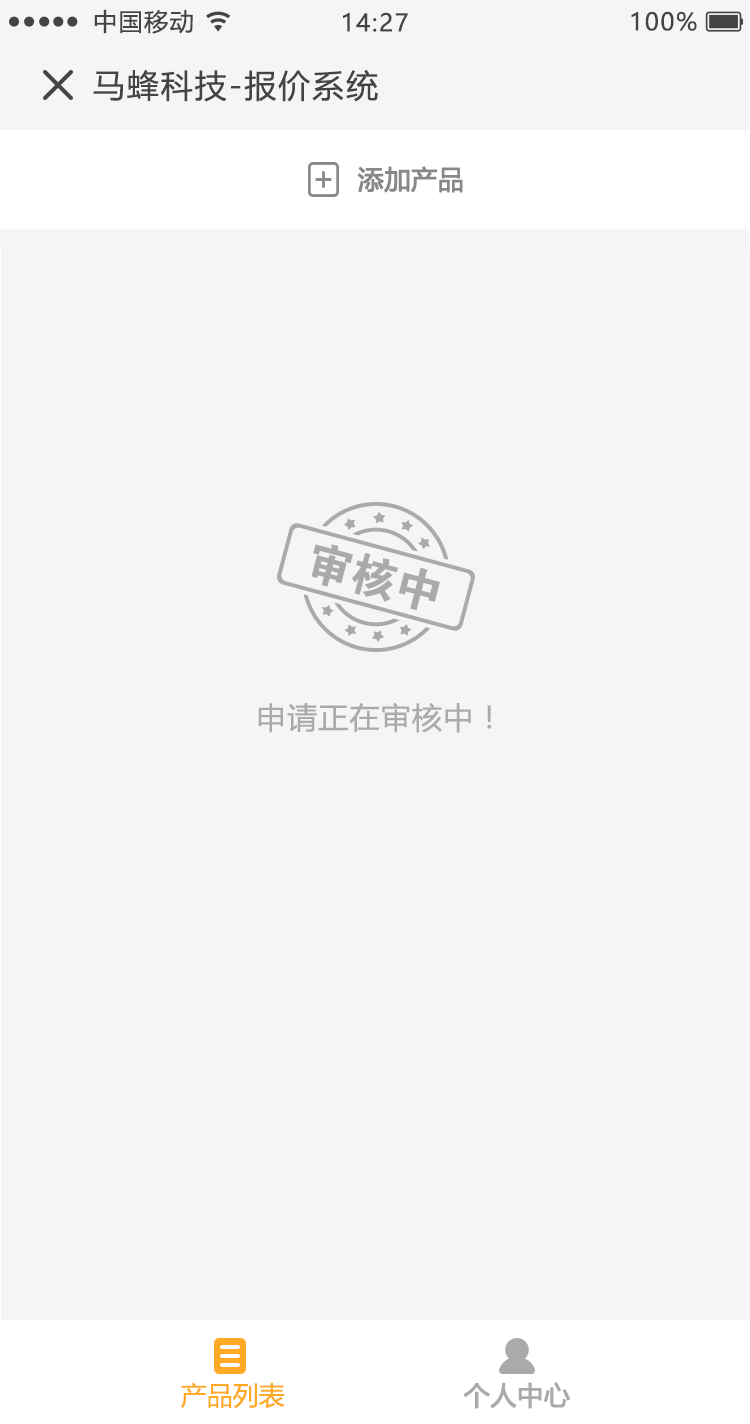
<style>
.page{position:relative;width:750px;height:1424px;background:#f5f5f5}
.page>*{position:absolute;margin:0}
.t1{font:24px "MicrosoftYaHeiUI";letter-spacing:0.06em;color:#444444}
.t2{font:32px "MicrosoftYaHeiUI";letter-spacing:0.06em;color:#444444}
.t3{font:26px "MicrosoftYaHeiUI";color:#888888;font-weight:bold}
.t4{font:30px "MicrosoftYaHeiUI";letter-spacing:0.04em;color:#aaaaaa}
.t5{font:26px "MicrosoftYaHeiUI";color:#ffa924}
.t6{font:26px "MicrosoftYaHeiUI";color:#aaaaaa;font-weight:bold}
</style>
<div class="page">
<p class="t1" style="left:94px;top:9px;width:99px;height:25px">中国移动</p>
<p class="t1" style="left:343px;top:12px;width:65px;height:20px">14:27</p>
<p class="t1" style="left:631px;top:11px;width:66px;height:20px">100%</p>
<p class="t2" style="left:93px;top:69px;width:285px;height:33px">马蜂科技-报价系统</p>
<p class="t3" style="left:357px;top:166px;width:106px;height:27px">添加产品</p>
<p class="t4" style="left:258px;top:702px;width:234px;height:31px">申请正在审核中！</p>
<p class="t5" style="left:181px;top:1382px;width:104px;height:27px">产品列表</p>
<p class="t6" style="left:463px;top:1382px;width:108px;height:27px">个人中心</p>
</div>
